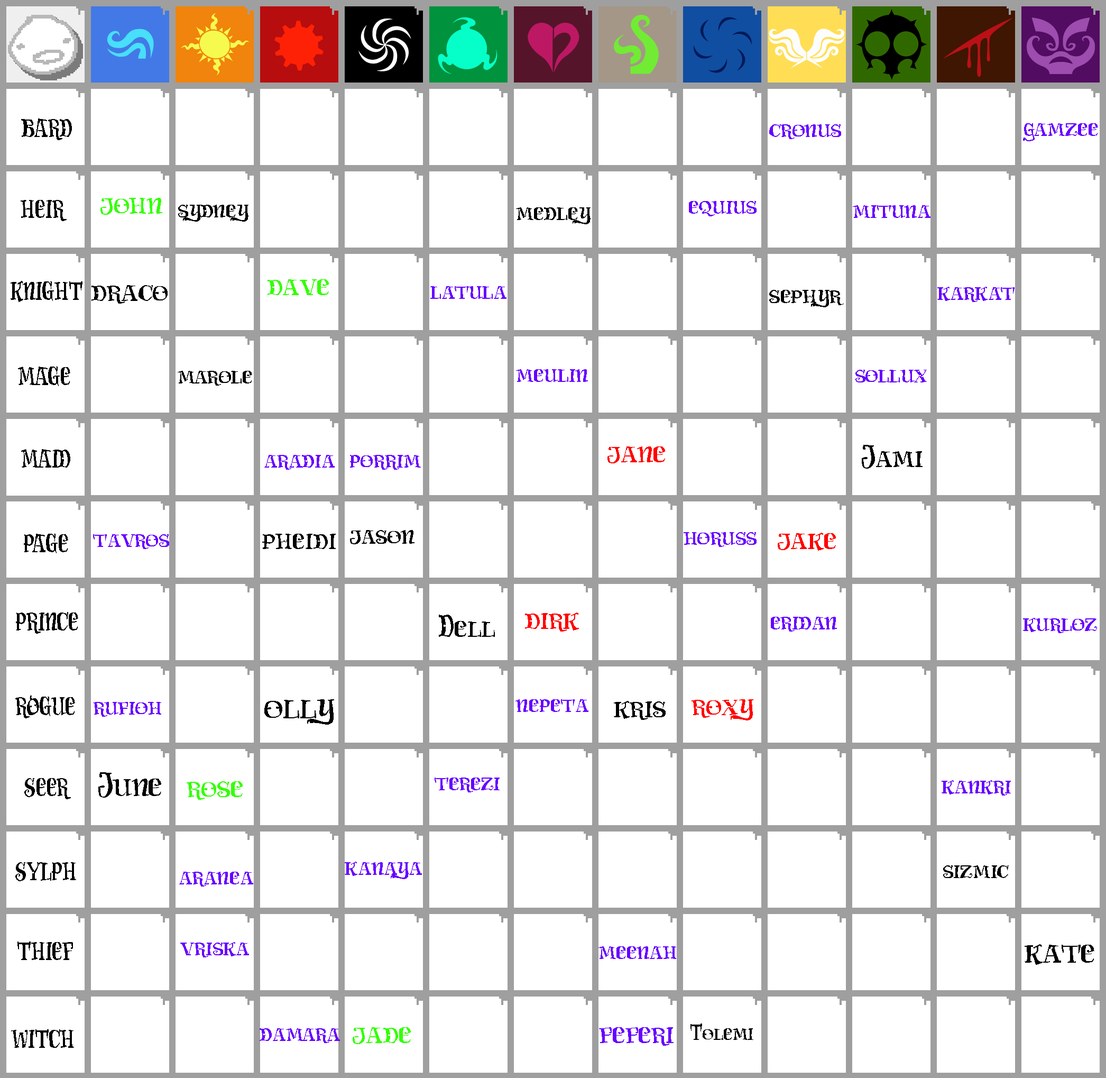
<style>
.page{position:relative;width:1106px;height:1078px;background:#ffffff}
.page>*{position:absolute;margin:0}
.t1{font:25.4px "Carima";color:#000000}
.t2{font:25.4px "Carima";color:#6600ff}
.t3{font:31.7px "Carima";color:#33ff00}
.t4{font:31.7px "Carima";color:#000000}
.t5{font:25.8px "Carima";color:#000000}
.t6{font:31.7px "Carima";color:#ff0000}
.t7{font:30.3px "Carima";color:#000000}
.t8{font:27.5px "Carima";color:#000000}
.t9{font:31.9px "Carima";color:#000000}
.t10{font:37.8px "Carima";color:#000000}
.t11{font:34.3px "Carima";color:#000000}
.t12{font:25.6px "Carima";color:#000000}
.t13{font:35.5px "Carima";color:#000000}
.t14{font:22.2px "Carima";color:#000000}
.t15{font:31.7px "Carima";color:#6600ff}
</style>
<div class="page">
<p class="t1" style="left:21px;top:118px;width:51px;height:22px">BARD</p>
<p class="t2" style="left:769px;top:124px;width:72px;height:15px">cronus</p>
<p class="t2" style="left:1023px;top:123px;width:75px;height:18px">gamzee</p>
<p class="t3" style="left:100px;top:198px;width:62px;height:17px">john</p>
<p class="t1" style="left:21px;top:200px;width:46px;height:21px">HEIR</p>
<p class="t1" style="left:178px;top:205px;width:71px;height:17px">sydney</p>
<p class="t1" style="left:516px;top:207px;width:75px;height:17px">medley</p>
<p class="t2" style="left:689px;top:201px;width:68px;height:15px">equius</p>
<p class="t2" style="left:853px;top:205px;width:78px;height:13px">mituna</p>
<p class="t1" style="left:11px;top:281px;width:72px;height:21px">KNIGHT</p>
<p class="t3" style="left:268px;top:279px;width:61px;height:16px">dave</p>
<p class="t4" style="left:91px;top:285px;width:77px;height:19px">draco</p>
<p class="t2" style="left:430px;top:286px;width:77px;height:13px">latula</p>
<p class="t5" style="left:769px;top:290px;width:75px;height:17px">sephyr</p>
<p class="t2" style="left:938px;top:287px;width:77px;height:15px">karkat</p>
<p class="t1" style="left:18px;top:366px;width:52px;height:20px">MAGE</p>
<p class="t1" style="left:178px;top:371px;width:74px;height:15px">marole</p>
<p class="t2" style="left:516px;top:369px;width:72px;height:13px">meulin</p>
<p class="t2" style="left:856px;top:370px;width:71px;height:12px">sollux</p>
<p class="t1" style="left:21px;top:449px;width:49px;height:19px">MAID</p>
<p class="t6" style="left:608px;top:446px;width:57px;height:17px">jane</p>
<p class="t4" style="left:862px;top:445px;width:61px;height:24px">Jami</p>
<p class="t2" style="left:264px;top:455px;width:71px;height:15px">aradia</p>
<p class="t2" style="left:350px;top:455px;width:71px;height:15px">porrim</p>
<p class="t1" style="left:24px;top:534px;width:44px;height:19px">PAGE</p>
<p class="t7" style="left:262px;top:534px;width:74px;height:15px">pheidi</p>
<p class="t8" style="left:350px;top:530px;width:65px;height:14px">jason</p>
<p class="t2" style="left:684px;top:532px;width:73px;height:15px">horuss</p>
<p class="t6" style="left:778px;top:533px;width:58px;height:18px">jake</p>
<p class="t2" style="left:93px;top:534px;width:76px;height:15px">tavros</p>
<p class="t1" style="left:16px;top:612px;width:62px;height:22px">PRINCE</p>
<p class="t9" style="left:439px;top:615px;width:56px;height:22px">Dell</p>
<p class="t6" style="left:525px;top:612px;width:54px;height:19px">dirk</p>
<p class="t2" style="left:771px;top:617px;width:66px;height:14px">eridan</p>
<p class="t2" style="left:1023px;top:618px;width:74px;height:15px">kurloz</p>
<p class="t1" style="left:15px;top:695px;width:60px;height:23px">ROGUE</p>
<p class="t2" style="left:93px;top:702px;width:68px;height:15px">rufioh</p>
<p class="t10" style="left:264px;top:699px;width:70px;height:26px">olly</p>
<p class="t2" style="left:516px;top:699px;width:73px;height:13px">nepeta</p>
<p class="t4" style="left:614px;top:701px;width:52px;height:19px">kris</p>
<p class="t6" style="left:692px;top:699px;width:62px;height:21px">roxy</p>
<p class="t11" style="left:98px;top:772px;width:63px;height:26px">June</p>
<p class="t1" style="left:24px;top:778px;width:47px;height:21px">SEER</p>
<p class="t3" style="left:187px;top:781px;width:56px;height:19px">rose</p>
<p class="t2" style="left:435px;top:777px;width:65px;height:15px">terezi</p>
<p class="t2" style="left:942px;top:780px;width:69px;height:15px">kankri</p>
<p class="t1" style="left:15px;top:862px;width:61px;height:19px">SYLPH</p>
<p class="t2" style="left:345px;top:861px;width:77px;height:18px">kanaya</p>
<p class="t12" style="left:943px;top:865px;width:66px;height:13px">sizmic</p>
<p class="t2" style="left:179px;top:872px;width:74px;height:14px">aranea</p>
<p class="t1" style="left:17px;top:941px;width:56px;height:19px">THIEF</p>
<p class="t2" style="left:180px;top:942px;width:69px;height:15px">vriska</p>
<p class="t2" style="left:599px;top:946px;width:77px;height:13px">meenah</p>
<p class="t13" style="left:1025px;top:944px;width:70px;height:21px">kate</p>
<p class="t14" style="left:691px;top:1023px;width:63px;height:17px">Tolemi</p>
<p class="t1" style="left:11px;top:1029px;width:63px;height:19px">WITCH</p>
<p class="t2" style="left:260px;top:1028px;width:80px;height:15px">damara</p>
<p class="t3" style="left:353px;top:1027px;width:58px;height:17px">jade</p>
<p class="t15" style="left:599px;top:1027px;width:75px;height:19px">feferi</p>
</div>
